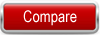
<style>
.page{position:relative;width:100px;height:35px}
.page>*{position:absolute;margin:0}
.t1{font:16px "ArialNarrowSpecialG1";color:#ffffff}
</style>
<div class="page">
<p class="t1" style="left:23px;top:10px;width:54px;height:16px">Compare</p>
</div>
